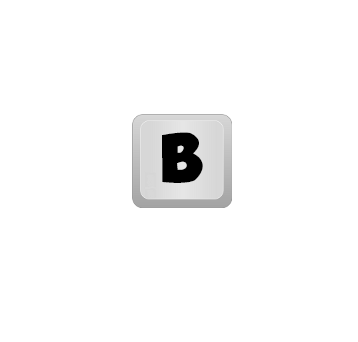
<style>
.page{position:relative;width:358px;height:342px;background:#ffffff}
.page>*{position:absolute;margin:0}
.t1{font:60px "GROBOLD";color:#000000}
</style>
<div class="page">
<p class="t1" style="left:162px;top:132px;width:41px;height:51px">B</p>
</div>
